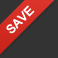
<style>
.page{position:relative;width:58px;height:58px;background:#333333}
.page>*{position:absolute;margin:0}
.t1{font:12px "ArialMT";color:#ffffff;font-weight:bold}
</style>
<div class="page">
<p class="t1" style="left:6px;top:5px;width:29px;height:29px;rotate:-45deg">SAVE</p>
</div>
